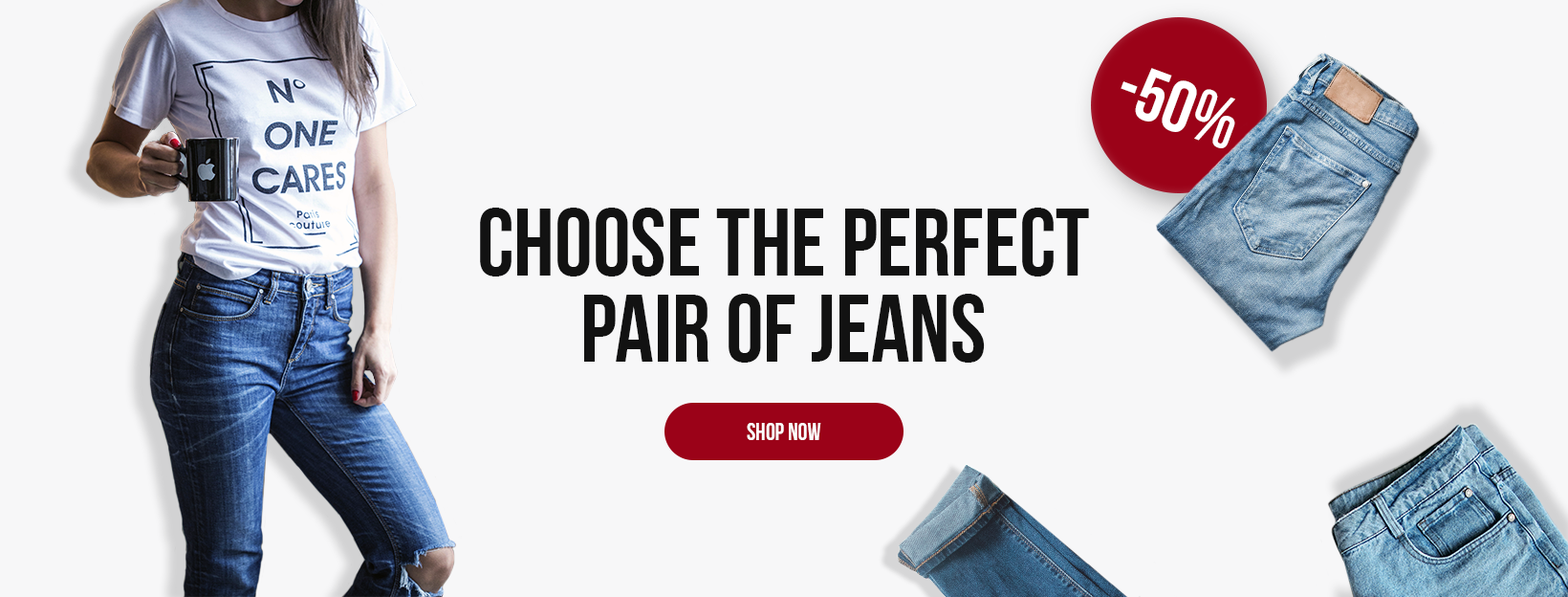
<style>
.page{position:relative;width:1568px;height:597px;background:#f7f7f8}
.page>*{position:absolute;margin:0}
.t1{font:73.1px "BebasNeueBold";color:#ffffff}
.t2{font:95.6px/86px "BebasNeueBold";color:#121212}
.t3{font:23.9px "BebasNeueBold";color:#fefefe}
</style>
<div class="page">
<p class="t1" style="left:1121px;top:68px;width:114px;height:80px;rotate:20deg">-50%</p>
<p class="t2" style="left:480px;top:207px;width:609px;height:155px;text-align:center">Choose the perfect<br>pair of jeans</p>
<p class="t3" style="left:747px;top:423px;width:74px;height:17px">Shop Now</p>
</div>
